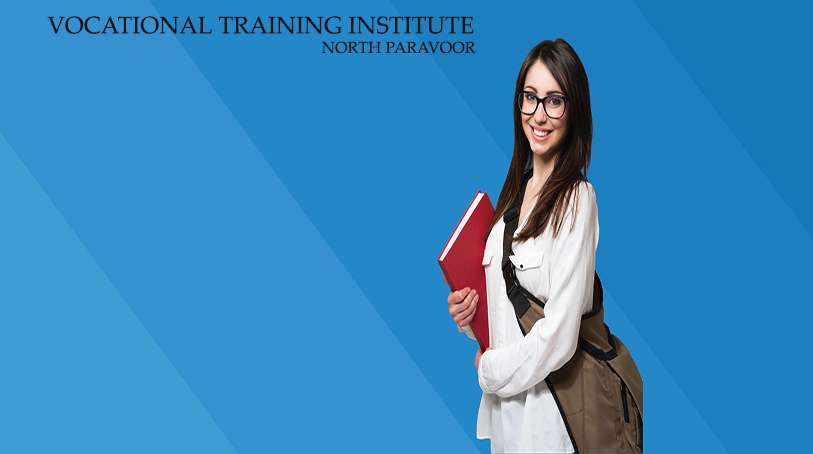
<style>
.page{position:relative;width:813px;height:454px;background:#3591d0}
.page>*{position:absolute;margin:0}
.t1{font:24px "PalatinoLinotype-Roman";color:#181414}
.t2{font:16px "PalatinoLinotype-Roman";color:#181414}
</style>
<div class="page">
<p class="t1" style="left:47px;top:16px;width:427px;height:18px">VOCATIONAL TRAINING INSTITUTE</p>
<p class="t2" style="left:322px;top:41px;width:154px;height:13px">NORTH PARAVOOR</p>
</div>
